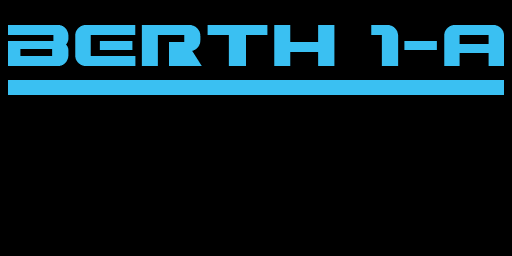
<style>
.page{position:relative;width:512px;height:256px;background:#000000}
.page>*{position:absolute;margin:0}
.t1{font:64px "Gunship";color:#3ac0f2}
</style>
<div class="page">
<p class="t1" style="left:8px;top:25px;width:496px;height:41px">BERTH 1-A</p>
</div>
